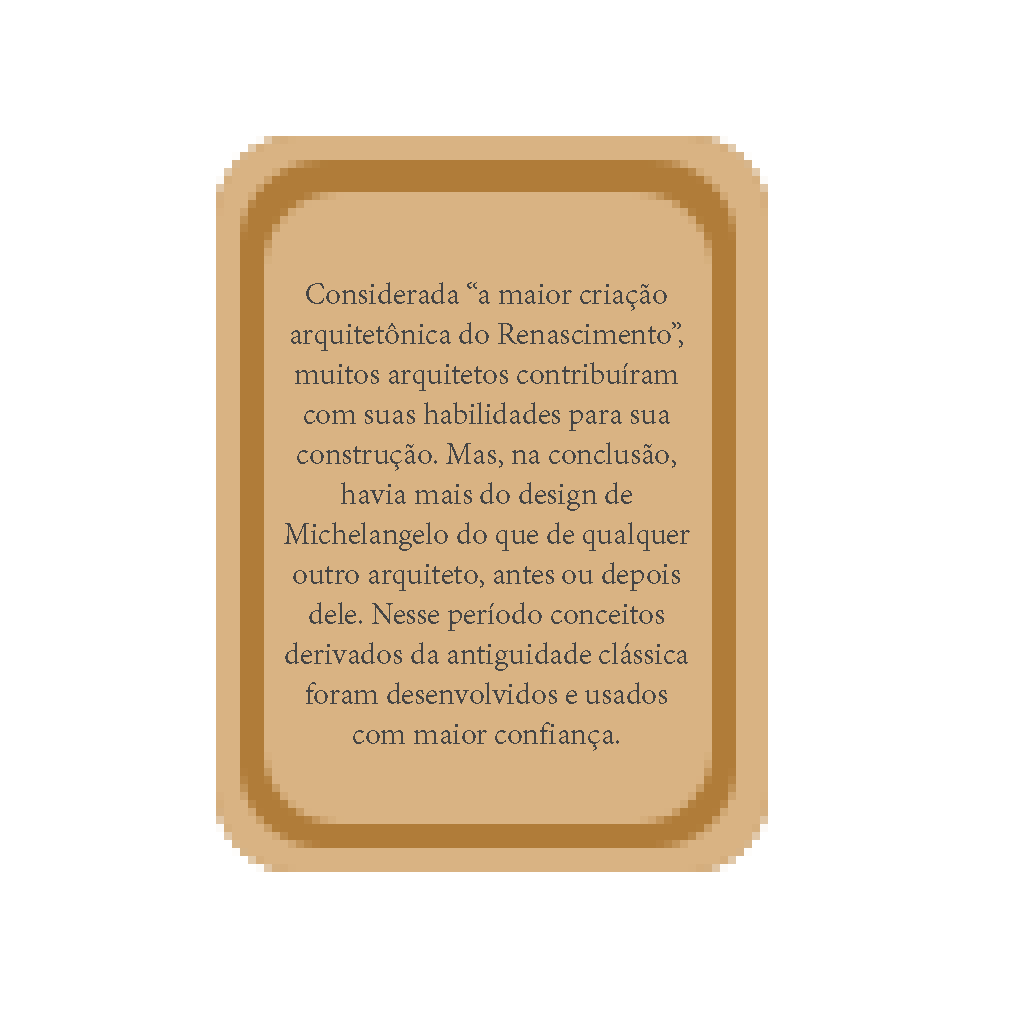
<style>
.page{position:relative;width:1024px;height:1024px;background:#ffffff}
.page>*{position:absolute;margin:0}
.t1{font:33.3px "AdobeDevanagari-Regular";color:#454545}
</style>
<div class="page">
<p class="t1" style="left:284px;top:282px;width:406px;height:469px;text-align:center">Considerada “a maior criação arquitetônica do Renascimento”, muitos arquitetos contribuíram com suas habilidades para sua construção. Mas, na conclusão, havia mais do design de Michelangelo do que de qualquer outro arquiteto, antes ou depois dele. Nesse período conceitos derivados da antiguidade clássica foram desenvolvidos e usados com maior confiança.</p>
</div>
